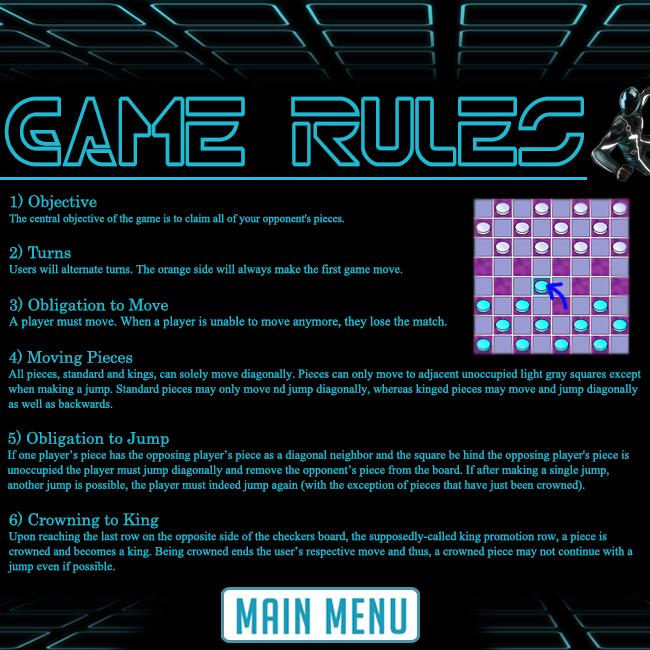
<style>
.page{position:relative;width:650px;height:650px;background:#000000}
.page>*{position:absolute;margin:0}
.t1{font:99px "TRN";color:#1fb9d1;scale:0.91 1}
.t2{font:14px/15px "Aparajita";color:#1fb9d1}
.t3{font:16px/15px "Century";color:#1fb9d1}
.t4{font:15px/15px "Aparajita";color:#1fb9d1}
.t5{font:16px/15px "Aparajita";color:#1fb9d1}
</style>
<div class="page">
<p class="t1" style="left:4px;top:96px;width:580px;height:71px">Game Rules</p>
<p class="t2" style="left:9px;top:193px;width:336px;height:32px"><span class="t3">1) Objective<br></span>The central objective of the game is to claim all of your opponent's pieces.</p>
<p class="t4" style="left:9px;top:244px;width:394px;height:32px"><span class="t3">2) Turns <br></span>Users will alternate turns. The orange side will always make the first game move.</p>
<p class="t5" style="left:9px;top:296px;width:438px;height:33px"><span class="t3">3) Obligation to Move <br></span>A player must move. When a player is unable to move anymore, they lose the match.</p>
<p class="t4" style="left:8px;top:349px;width:633px;height:59px"><span class="t3">4) Moving Pieces <br></span>All pieces, standard and kings, can solely move diagonally. Pieces can only move to adjacent unoccupied light gray squares except <br>when making a jump. Standard pieces may only move nd jump diagonally, whereas kinged pieces may move and jump diagonally <br>as well as backwards.</p>
<p class="t4" style="left:7px;top:430px;width:622px;height:62px"><span class="t3">5) Obligation to Jump <br></span>If one player’s piece has the opposing player’s piece as a diagonal neighbor and the square be hind the opposing player's piece is <br>unoccupied the player must jump diagonally and remove the opponent’s piece from the board. If after making a single jump, <br>another jump is possible, the player must indeed jump again (with the exception of pieces that have just been crowned).</p>
<p class="t4" style="left:7px;top:511px;width:626px;height:62px"><span class="t3">6) Crowning to King <br></span>Upon reaching the last row on the opposite side of the checkers board, the supposedly-called king promotion row, a piece is <br>crowned and becomes a king. Being crowned ends the user’s respective move and thus, a crowned piece may not continue with a <br>jump even if possible.</p>
</div>
